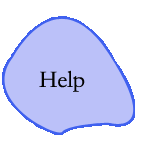
<style>
.page{position:relative;width:144px;height:144px;background:#bbc1f9}
.page>*{position:absolute;margin:0}
.t1{font:24px "STFangsong";color:#020200}
</style>
<div class="page">
<p class="t1" style="left:39px;top:70px;width:46px;height:22px">Help</p>
</div>
